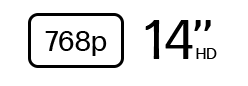
<style>
.page{position:relative;width:248px;height:86px;background:#ffffff}
.page>*{position:absolute;margin:0}
.t1{font:54.1px "FormaDJRMicro-Regular";color:#000000}
.t2{font:28.8px "FormaDJRMicro-Regular";color:#000000}
.t3{font:15.3px "FormaDJRMicro-Regular";color:#000000}
</style>
<div class="page">
<p class="t1" style="left:145px;top:20px;width:66px;height:39px">14’’</p>
<p class="t2" style="left:45px;top:31px;width:62px;height:25px">768p</p>
<p class="t3" style="left:196px;top:48px;width:21px;height:11px">HD</p>
</div>
